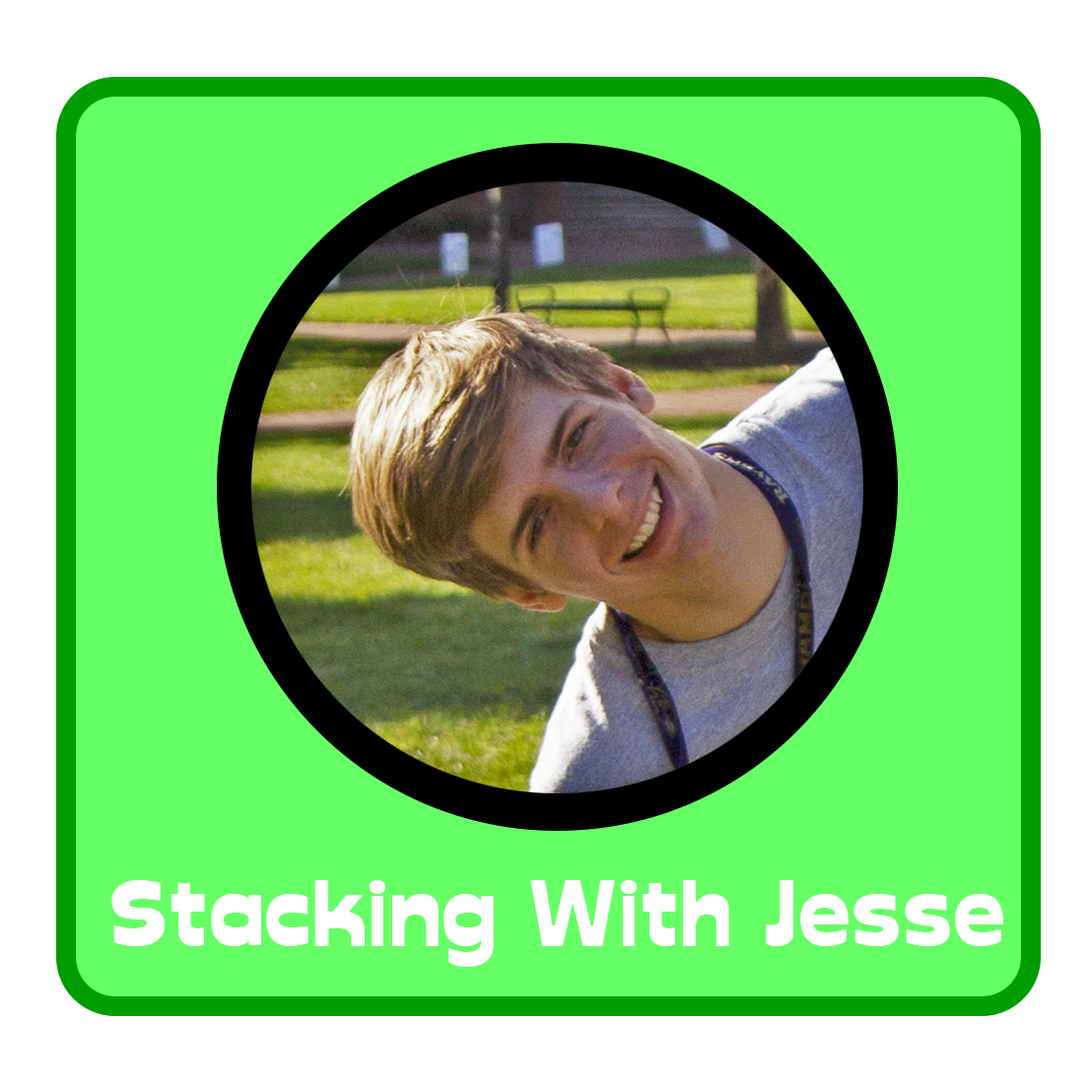
<style>
.page{position:relative;width:1092px;height:1092px;background:#66ff66}
.page>*{position:absolute;margin:0}
.t1{font:90.3px "Glockenspiel";color:#ffffff}
</style>
<div class="page">
<p class="t1" style="left:111px;top:880px;width:892px;height:87px">Stacking With Jesse</p>
</div>
